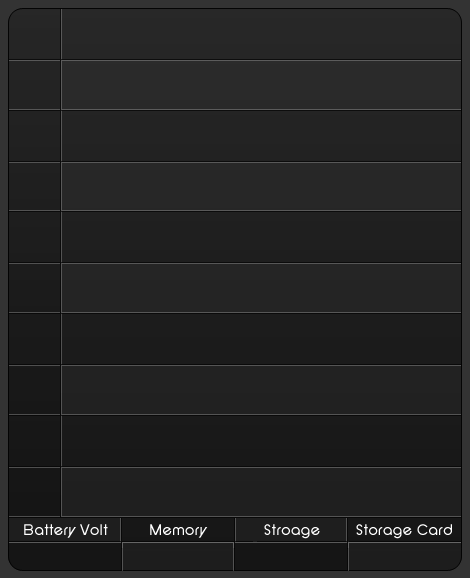
<style>
.page{position:relative;width:470px;height:578px}
.page>*{position:absolute;margin:0}
.t1{font:16px "SFNewRepublic";color:#ffffff}
</style>
<div class="page">
<p class="t1" style="left:24px;top:524px;width:84px;height:14px">Battery Volt</p>
<p class="t1" style="left:150px;top:524px;width:58px;height:14px">Memory</p>
<p class="t1" style="left:264px;top:524px;width:56px;height:15px">Stroage</p>
<p class="t1" style="left:356px;top:524px;width:96px;height:15px">Storage Card</p>
</div>
